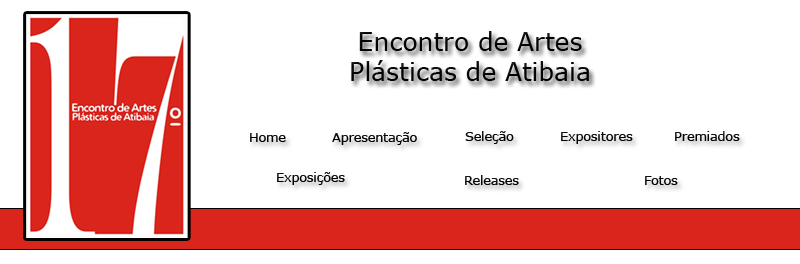
<style>
.page{position:relative;width:800px;height:264px;background:#ffffff}
.page>*{position:absolute;margin:0}
.t1{font:25px "MSReferenceSansSerif";color:#000000}
.t2{font:12.5px "MSReferenceSansSerif";color:#000000}
.t3{font:12.5px "MSReferenceSansSerif";color:#010101}
</style>
<div class="page">
<p class="t1" style="left:351px;top:31px;width:238px;height:50px;text-align:center">Encontro de Artes<br>Plásticas de Atibaia</p>
<p class="t2" style="left:250px;top:133px;width:36px;height:9px">Home</p>
<p class="t2" style="left:332px;top:132px;width:85px;height:13px">Apresentação</p>
<p class="t2" style="left:465px;top:131px;width:49px;height:13px">Seleção</p>
<p class="t2" style="left:561px;top:131px;width:72px;height:13px">Expositores</p>
<p class="t2" style="left:675px;top:131px;width:65px;height:10px">Premiados</p>
<p class="t2" style="left:277px;top:172px;width:68px;height:13px">Exposições</p>
<p class="t3" style="left:465px;top:175px;width:54px;height:10px">Releases</p>
<p class="t3" style="left:645px;top:176px;width:33px;height:9px">Fotos</p>
</div>
